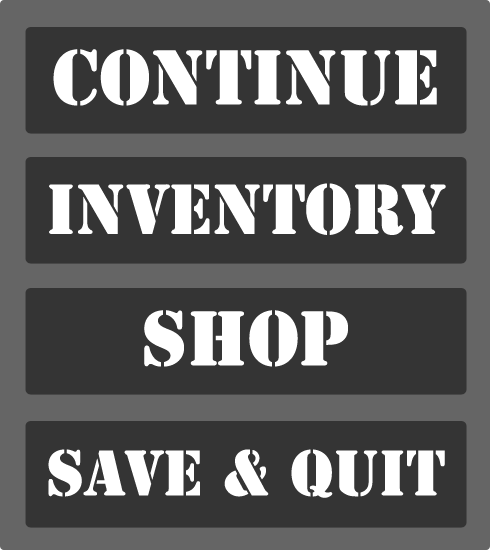
<style>
.page{position:relative;width:490px;height:550px;background:#343434}
.page>*{position:absolute;margin:0}
.t1{font:72px "StencilStd";color:#ffffff}
.t2{font:66px "StencilStd";color:#ffffff}
.t3{font:60px "StencilStd";color:#ffffff}
</style>
<div class="page">
<p class="t1" style="left:53px;top:49px;width:384px;height:57px">CONTINUE</p>
<p class="t2" style="left:49px;top:183px;width:397px;height:52px">INVENTORY</p>
<p class="t1" style="left:144px;top:310px;width:204px;height:57px">SHOP</p>
<p class="t3" style="left:48px;top:449px;width:397px;height:49px">SAVE &amp; QUIT</p>
</div>
